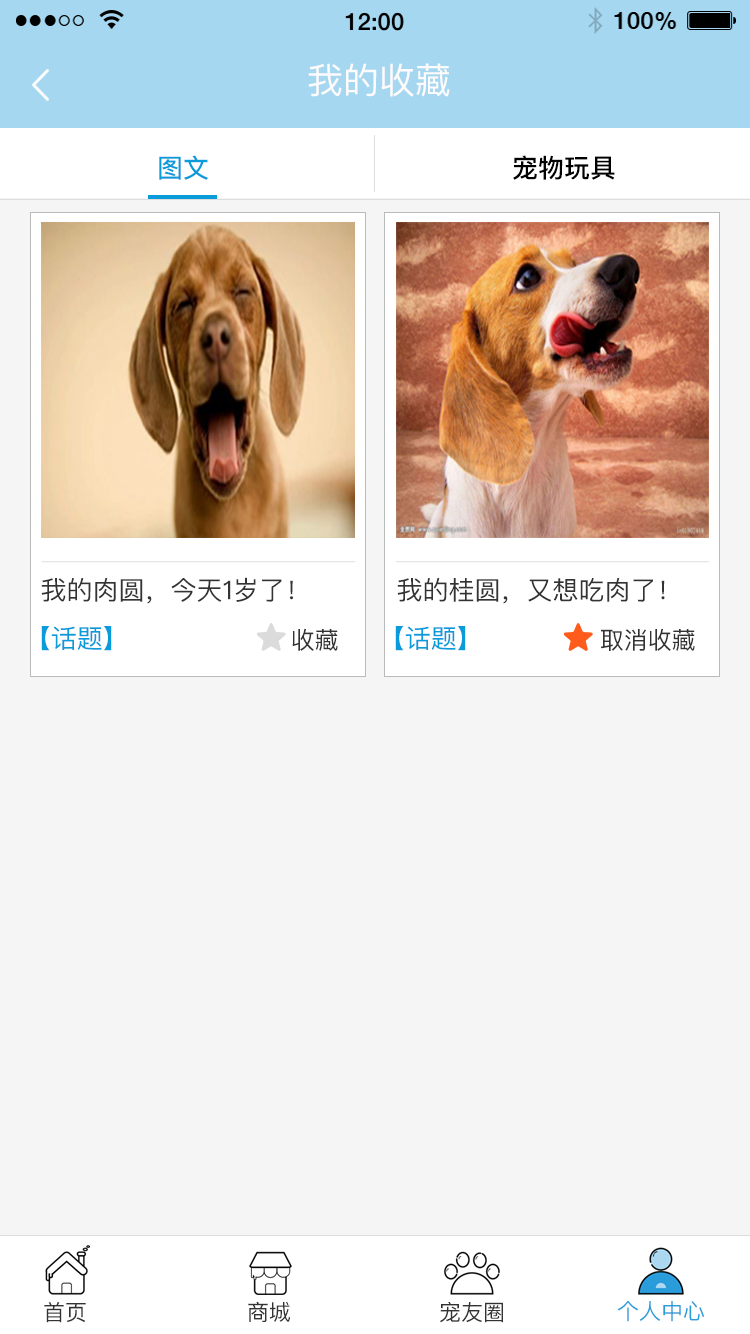
<style>
.page{position:relative;width:750px;height:1334px;background:#f5f5f5}
.page>*{position:absolute;margin:0}
.t1{font:36px "PingFangSC-Regular";color:#fdfbfb}
.t2{font:26px "PingFangSC-Medium";color:#0a9cda}
.t3{font:26px "PingFangSC-Medium";color:#000000}
.t4{font:26px "PingFangSC-Regular";color:#333333}
.t5{font:26px "PingFangSC-Regular";color:#0a9cda}
.t6{font:24px "PingFangSC-Regular";color:#333333}
.t7{font:22px "PingFangSC-Regular";color:#333333}
.t8{font:22px "PingFangSC-Regular";color:#2a9cda}
</style>
<div class="page">
<p class="t1" style="left:308px;top:63px;width:142px;height:34px">我的收藏</p>
<p class="t2" style="left:159px;top:155px;width:49px;height:25px">图文</p>
<p class="t3" style="left:513px;top:155px;width:102px;height:25px">宠物玩具</p>
<p class="t4" style="left:41px;top:577px;width:252px;height:27px">我的肉圆，今天1岁了！</p>
<p class="t4" style="left:397px;top:578px;width:268px;height:26px">我的桂圆，又想吃肉了！</p>
<p class="t5" style="left:41px;top:626px;width:71px;height:25px">【话题】</p>
<p class="t6" style="left:292px;top:628px;width:46px;height:23px">收藏</p>
<p class="t5" style="left:395px;top:626px;width:71px;height:25px">【话题】</p>
<p class="t6" style="left:600px;top:628px;width:95px;height:23px">取消收藏</p>
<p class="t7" style="left:44px;top:1301px;width:42px;height:22px">首页</p>
<p class="t7" style="left:248px;top:1301px;width:42px;height:21px">商城</p>
<p class="t7" style="left:440px;top:1302px;width:63px;height:21px">宠友圈</p>
<p class="t8" style="left:617px;top:1301px;width:88px;height:21px">个人中心</p>
</div>
